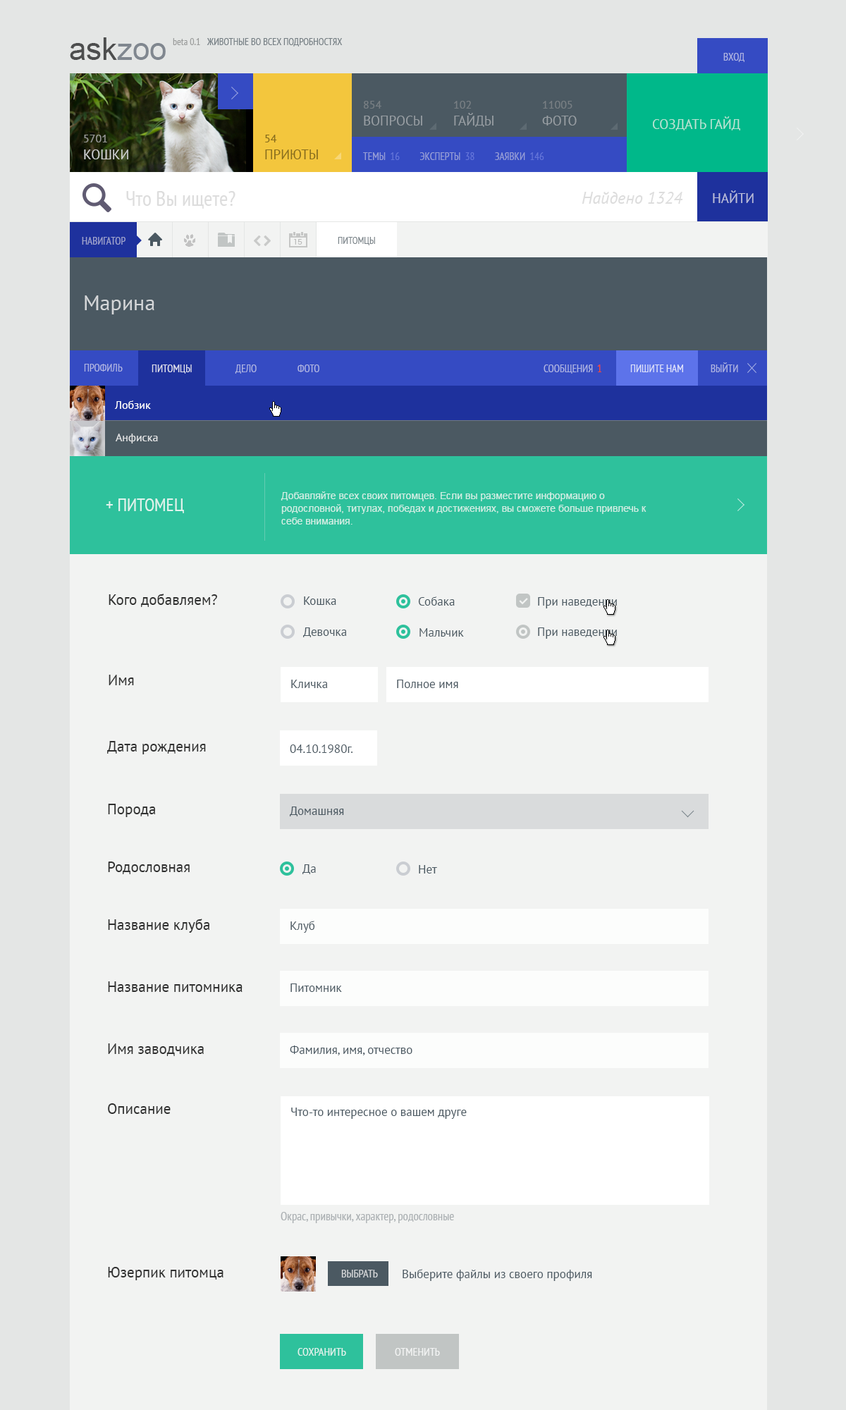
<style>
.page{position:relative;width:846px;height:1410px;background:#f2f3f2}
.page>*{position:absolute;margin:0}
.t1{font:10.6px "PTSans-Narrow";color:#aeb4e2;text-transform:uppercase}
.t2{font:10.6px "PTSans-Narrow";color:#9ea3cd;text-transform:uppercase}
.t3{font:9.9px "PTSans-Narrow";color:#7b848a;text-transform:uppercase}
.t4{font:21.1px "PTSans-Regular";color:#d4d6d8}
.t5{font:10.6px "PTSans-Narrow";color:#dfe0ed;text-transform:uppercase}
.t6{font:10.6px "PTSans-Narrow";color:#fd482e;text-transform:uppercase}
.t7{font:10.6px "PTSans-Narrow";color:#dfe3fa;text-transform:uppercase}
.t8{font:11.3px "PTSans-Regular";color:#ffffff}
.t9{font:11.3px "PTSans-Regular";color:#e3e4e5}
.t10{font:9.9px/12.7px "ArialMT";color:#d0eee4}
.t11{font:18.3px "PTSans-Narrow";color:#e0f3ed;text-transform:uppercase}
.t12{font:14.8px "PTSans-Regular";color:#313131}
.t13{font:12px "PTSans-Regular";color:#4b5962}
.t14{font:12px "PTSans-Narrow";color:#abb0b3}
.t15{font:11.3px "PTSans-Narrow";color:#d4d6d8;text-transform:uppercase}
.t16{font:11.3px "PTSans-Narrow";color:#e0f3ed;text-transform:uppercase}
.t17{font:11.3px "PTSans-Narrow";color:#ffffff;text-transform:uppercase}
</style>
<div class="page">
<p class="t1" style="left:723px;top:53px;width:21px;height:9px">вход</p>
<p class="t2" style="left:82px;top:237px;width:43px;height:8px">навигатор</p>
<p class="t3" style="left:338px;top:237px;width:37px;height:8px">питомцы</p>
<p class="t4" style="left:85px;top:295px;width:69px;height:19px">Марина</p>
<p class="t1" style="left:84px;top:364px;width:39px;height:7px">профиль</p>
<p class="t5" style="left:152px;top:364px;width:40px;height:10px">питомцы</p>
<p class="t1" style="left:235px;top:364px;width:22px;height:10px">дело</p>
<p class="t1" style="left:297px;top:364px;width:22px;height:8px">фото</p>
<p class="t1" style="left:543px;top:364px;width:50px;height:10px">сообщения</p>
<p class="t6" style="left:597px;top:364px;width:4px;height:8px">1</p>
<p class="t7" style="left:630px;top:364px;width:53px;height:8px">пишите нам</p>
<p class="t1" style="left:711px;top:362px;width:27px;height:10px">выйти</p>
<p class="t8" style="left:114px;top:400px;width:37px;height:9px">Лобзик</p>
<p class="t9" style="left:116px;top:433px;width:42px;height:10px">Анфиска</p>
<p class="t10" style="left:281px;top:491px;width:365px;height:33px">Добавляйте всех своих питомцев. Если вы разместите информацию о родословной, титулах, победах и достижениях, вы сможете больше привлечь к себе внимания.</p>
<p class="t11" style="left:106px;top:498px;width:78px;height:15px">+ питомец</p>
<p class="t12" style="left:109px;top:594px;width:108px;height:13px">Кого добавляем?</p>
<p class="t13" style="left:304px;top:596px;width:32px;height:9px">Кошка</p>
<p class="t13" style="left:418px;top:596px;width:37px;height:9px">Собака</p>
<p class="t13" style="left:538px;top:597px;width:79px;height:11px">При наведении</p>
<p class="t13" style="left:303px;top:627px;width:44px;height:10px">Девочка</p>
<p class="t13" style="left:419px;top:628px;width:45px;height:9px">Мальчик</p>
<p class="t13" style="left:538px;top:627px;width:79px;height:12px">При наведении</p>
<p class="t12" style="left:109px;top:675px;width:25px;height:10px">Имя</p>
<p class="t13" style="left:291px;top:679px;width:37px;height:9px">Кличка</p>
<p class="t13" style="left:397px;top:679px;width:61px;height:9px">Полное имя</p>
<p class="t12" style="left:107px;top:741px;width:99px;height:13px">Дата рождения</p>
<p class="t13" style="left:290px;top:744px;width:62px;height:9px">04.10.1980г.</p>
<p class="t12" style="left:108px;top:804px;width:48px;height:13px">Порода</p>
<p class="t13" style="left:290px;top:806px;width:54px;height:10px">Домашняя</p>
<p class="t12" style="left:108px;top:861px;width:82px;height:13px">Родословная</p>
<p class="t13" style="left:302px;top:864px;width:14px;height:10px">Да</p>
<p class="t13" style="left:419px;top:865px;width:18px;height:8px">Нет</p>
<p class="t12" style="left:108px;top:918px;width:102px;height:15px">Название клуба</p>
<p class="t13" style="left:290px;top:921px;width:25px;height:12px">Клуб</p>
<p class="t12" style="left:108px;top:981px;width:134px;height:11px">Название питомника</p>
<p class="t13" style="left:290px;top:983px;width:52px;height:9px">Питомник</p>
<p class="t12" style="left:108px;top:1043px;width:96px;height:13px">Имя заводчика</p>
<p class="t13" style="left:290px;top:1045px;width:122px;height:10px">Фамилия, имя, отчество</p>
<p class="t12" style="left:108px;top:1103px;width:63px;height:11px">Описание</p>
<p class="t13" style="left:291px;top:1107px;width:176px;height:12px">Что-то интересное о вашем друге</p>
<p class="t14" style="left:281px;top:1212px;width:173px;height:11px">Окрас, привычки, характер, родословные</p>
<p class="t12" style="left:108px;top:1267px;width:115px;height:13px">Юзерпик питомца</p>
<p class="t15" style="left:341px;top:1269px;width:37px;height:8px">Выбрать</p>
<p class="t13" style="left:402px;top:1269px;width:190px;height:12px">Выберите файлы из своего профиля</p>
<p class="t16" style="left:297px;top:1348px;width:49px;height:7px">сохранить</p>
<p class="t17" style="left:395px;top:1348px;width:45px;height:7px;opacity:0.8">отменить</p>
</div>
